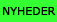
<style>
.page{position:relative;width:57px;height:22px;background:#33ff33}
.page>*{position:absolute;margin:0}
.t1{font:11px "Verdana";color:#000000}
</style>
<div class="page">
<p class="t1" style="left:3px;top:7px;width:53px;height:8px">NYHEDER</p>
</div>
